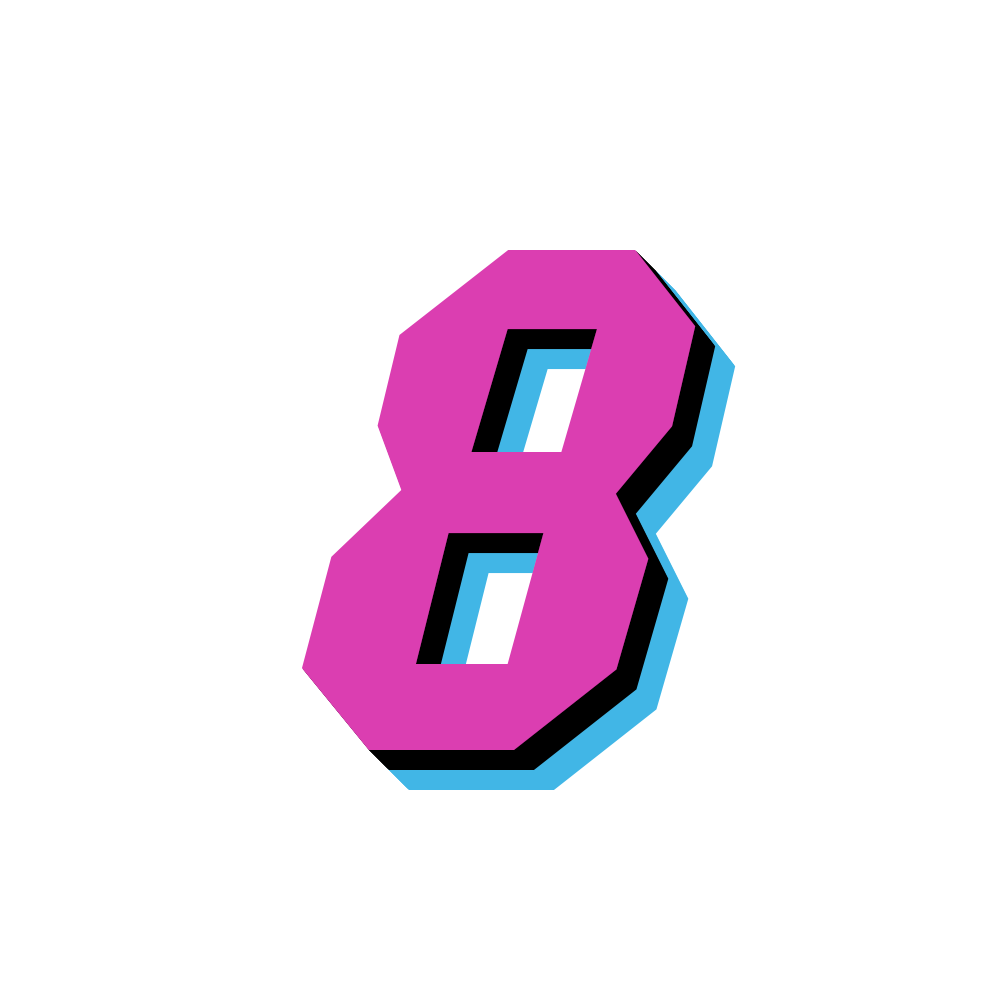
<style>
.page{position:relative;width:1000px;height:1000px;background:#ffffff}
.page>*{position:absolute;margin:0}
.t1{font:625px "NBAHeat";color:#db3eb1}
</style>
<div class="page">
<p class="t1" style="left:302px;top:250px;width:394px;height:500px">8</p>
</div>
